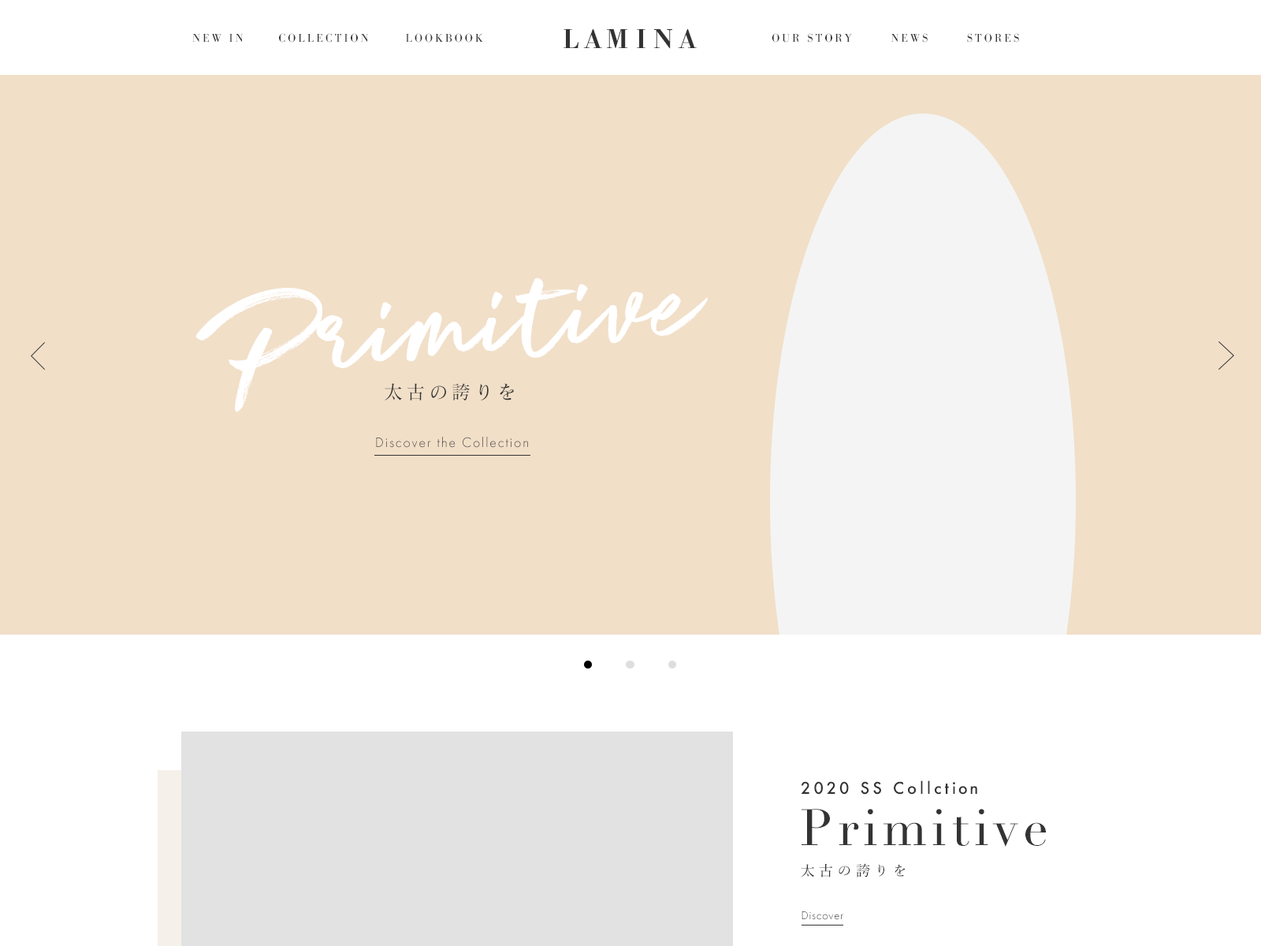
<style>
.page{position:relative;width:1261px;height:946px;background:#f1dfc8}
.page>*{position:absolute;margin:0}
.t1{font:28.4px "BodoniURW-Med";letter-spacing:0.2em;color:#333333}
.t2{font:11.8px "BodoniURW-Reg";letter-spacing:0.2em;color:#333333}
.t3{font:146.6px "SuperFlyOne";letter-spacing:0.025em;color:#ffffff}
.t4{font:18.9px "MatisseProN-M";letter-spacing:0.2em;color:#333333}
.t5{font:14.2px "FuturaPT-Light";letter-spacing:0.1em;color:#333333}
.t6{font:15.8px "Futura-Medium";letter-spacing:0.2em;color:#333333}
.t7{font:50.4px "Didot";letter-spacing:0.1em;color:#333333}
.t8{font:14.2px "YuMin-Medium";letter-spacing:0.3em;color:#333333}
.t9{font:11.8px "FuturaPT-Light";letter-spacing:0.05em}
</style>
<div class="page">
<p class="t1" style="left:563px;top:29px;width:134px;height:20px">LAMINA</p>
<p class="t2" style="left:192px;top:34px;width:52px;height:9px">NEW IN</p>
<p class="t2" style="left:279px;top:33px;width:90px;height:10px">COLLECTION</p>
<p class="t2" style="left:406px;top:33px;width:77px;height:10px">LOOKBOOK</p>
<p class="t2" style="left:772px;top:33px;width:80px;height:10px">OUR STORY</p>
<p class="t2" style="left:891px;top:33px;width:37px;height:10px">NEWS</p>
<p class="t2" style="left:967px;top:33px;width:52px;height:10px">STORES</p>
<p class="t3" style="left:195px;top:277px;width:513px;height:135px;rotate:-5deg">Primitive</p>
<p class="t4" style="left:385px;top:383px;width:129px;height:17px">太古の誇りを</p>
<p class="t5" style="left:376px;top:437px;width:152px;height:11px">Discover the Collection</p>
<p class="t6" style="left:801px;top:780px;width:176px;height:14px">2020 SS Collction</p>
<p class="t7" style="left:801px;top:809px;width:245px;height:37px">Primitive</p>
<p class="t8" style="left:801px;top:863px;width:104px;height:14px">太古の誇りを</p>
<p class="t9" style="left:801px;top:911px;width:42px;height:9px">Discover</p>
</div>
